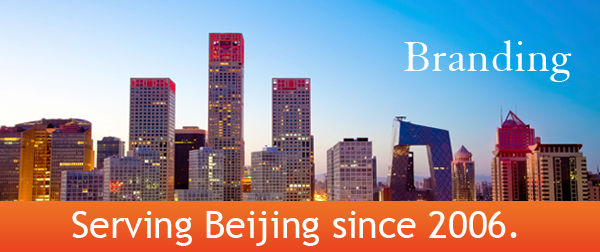
<style>
.page{position:relative;width:600px;height:252px}
.page>*{position:absolute;margin:0}
.t1{font:45.8px "ElegantGaramondBT-Roman";color:#ffffff}
.t2{font:37.5px "TrebuchetMS";color:#ffffff}
</style>
<div class="page">
<p class="t1" style="left:404px;top:40px;width:168px;height:42px">Branding</p>
<p class="t2" style="left:72px;top:211px;width:445px;height:35px">Serving Beijing since 2006.</p>
</div>
